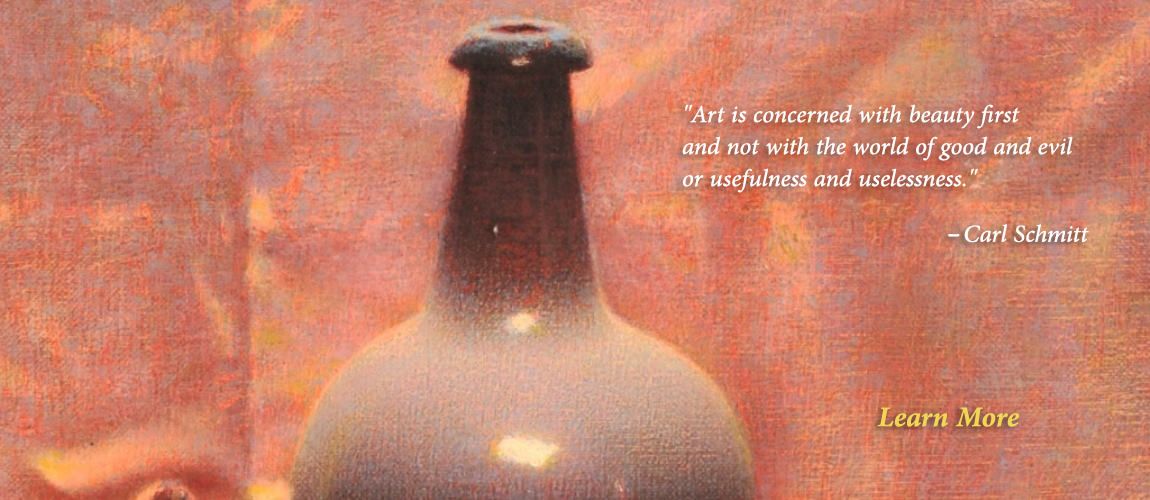
<style>
.page{position:relative;width:1150px;height:500px}
.page>*{position:absolute;margin:0}
.t1{font:34px/32px "AdobeArabic-Italic";color:#ffffff}
.t2{font:34px "AdobeArabic-Italic";color:#ffffff}
.t3{font:34px "Waseem";color:#ffffff}
.t4{font:40px "AdobeArabic-BoldItalic";color:#f0d557}
</style>
<div class="page">
<p class="t1" style="left:682px;top:104px;width:391px;height:89px">"Art is concerned with beauty first<br>and not with the world of good and evil<br>or usefulness and uselessness."</p>
<p class="t2" style="left:948px;top:224px;width:141px;height:19px"><span class="t3">- </span>Carl Schmitt</p>
<p class="t4" style="left:877px;top:407px;width:143px;height:20px">Learn More</p>
</div>
